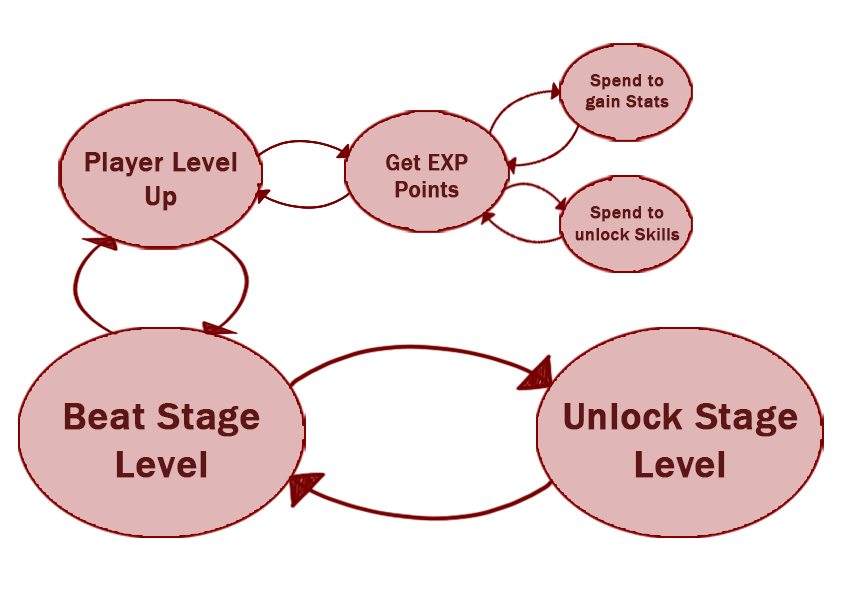
<style>
.page{position:relative;width:842px;height:595px;background:#ffffff}
.page>*{position:absolute;margin:0}
.t1{font:18.2px "FranklinGothic-Medium";letter-spacing:0.005em;color:#601515;font-weight:bold}
.t2{font:27.8px "FranklinGothic-Medium";letter-spacing:0.005em;color:#601515;font-weight:bold}
.t3{font:22.6px "FranklinGothic-Medium";letter-spacing:0.005em;color:#601515;font-weight:bold}
.t4{font:39.3px "FranklinGothic-Medium";letter-spacing:0.005em;color:#601515;font-weight:bold}
</style>
<div class="page">
<p class="t1" style="left:585px;top:74px;width:84px;height:37px;text-align:center">Spend to<br>gain Stats</p>
<p class="t2" style="left:85px;top:152px;width:152px;height:59px;text-align:center">Player Level<br>Up</p>
<p class="t3" style="left:386px;top:154px;width:82px;height:44px;text-align:center">Get EXP<br>Points</p>
<p class="t1" style="left:575px;top:206px;width:105px;height:35px;text-align:center">Spend to<br>unlock Skills</p>
<p class="t4" style="left:64px;top:403px;width:196px;height:75px;text-align:center">Beat Stage<br>Level</p>
<p class="t4" style="left:564px;top:403px;width:234px;height:75px;text-align:center">Unlock Stage<br>Level</p>
</div>
